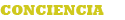
<style>
.page{position:relative;width:125px;height:20px;background:#ffffff}
.page>*{position:absolute;margin:0}
.t1{font:14px "Rockwell-ExtraBold";color:#cfc91d}
.t2{font:14px "Rockwell-ExtraBold";color:#ffffff}
</style>
<div class="page">
<p class="t1" style="left:0px;top:5px;width:123px;height:10px">CONCIENCIA<span class="t2"> TI</span></p>
</div>
